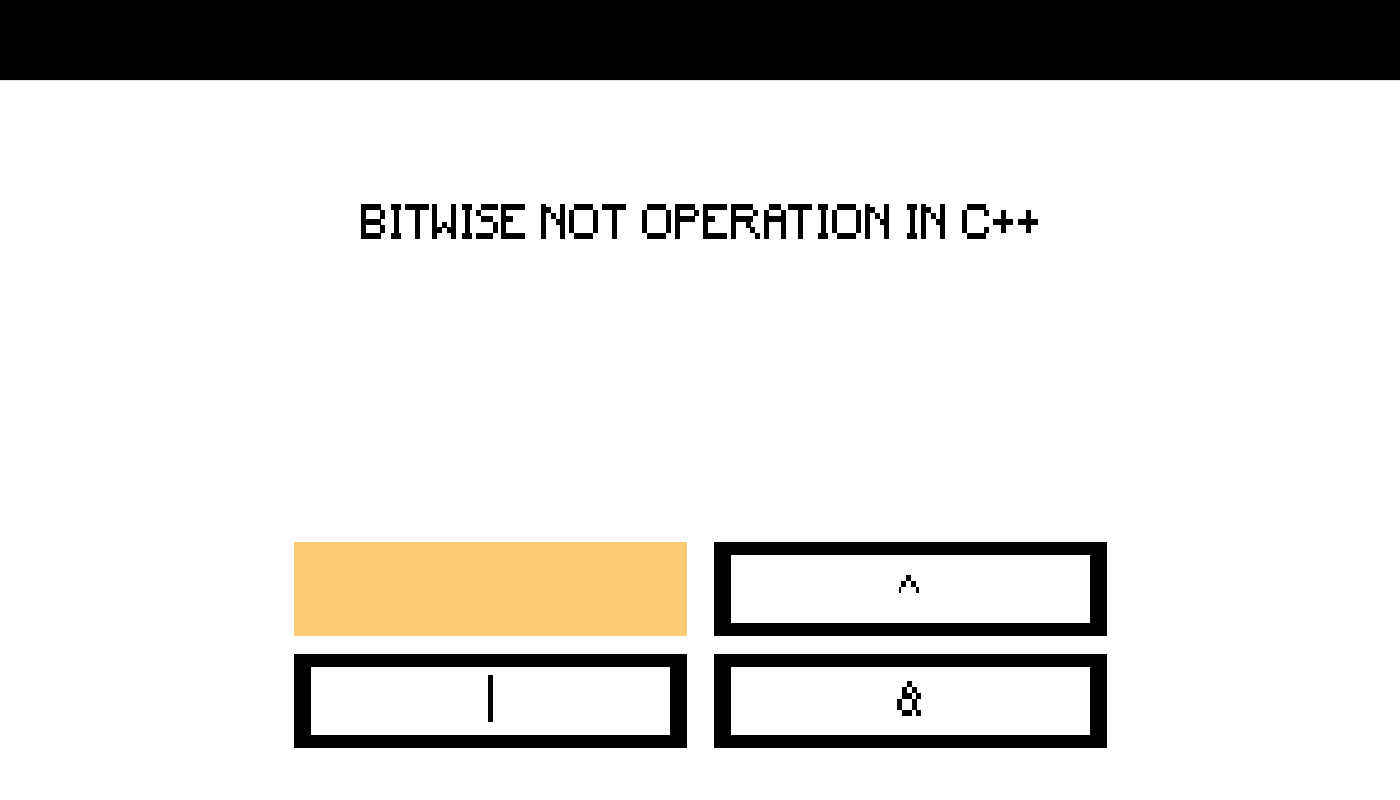
<style>
.page{position:relative;width:1400px;height:800px;background:#ffffff}
.page>*{position:absolute;margin:0}
.t1{font:45.8px "Minecraft";letter-spacing:0.02em;color:#000000;scale:0.86 1}
</style>
<div class="page">
<p class="t1" style="left:361px;top:204px;width:677px;height:35px">BITWISE NOT OPERATION IN C++</p>
<p class="t1" style="left:899px;top:575px;width:20px;height:18px">^</p>
<p class="t1" style="left:897px;top:681px;width:24px;height:35px">&amp;</p>
</div>
